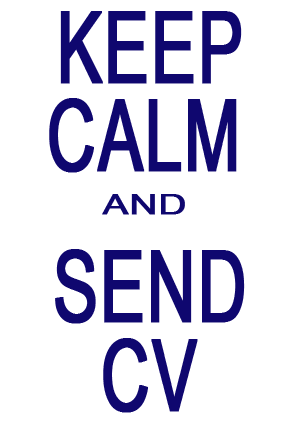
<style>
.page{position:relative;width:300px;height:428px;background:#ffffff}
.page>*{position:absolute;margin:0}
.t1{font:98.8px "ArialNarrow";color:#0f076f;font-weight:bold;scale:0.83 1}
.t2{font:28.2px "ArialNarrow";color:#0f076f;font-weight:bold;scale:1.66 1}
</style>
<div class="page">
<p class="t1" style="left:60px;top:11px;width:182px;height:73px">KEEP</p>
<p class="t1" style="left:49px;top:98px;width:188px;height:75px">CALM</p>
<p class="t2" style="left:102px;top:194px;width:83px;height:21px">AND</p>
<p class="t1" style="left:55px;top:249px;width:190px;height:75px">SEND</p>
<p class="t1" style="left:103px;top:338px;width:95px;height:75px">CV</p>
</div>
